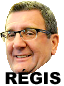
<style>
.page{position:relative;width:64px;height:86px;background:#ffffff}
.page>*{position:absolute;margin:0}
.t1{font:16.5px "Arial-Black";color:#000000}
</style>
<div class="page">
<p class="t1" style="left:5px;top:69px;width:56px;height:16px">RÉGIS</p>
</div>
